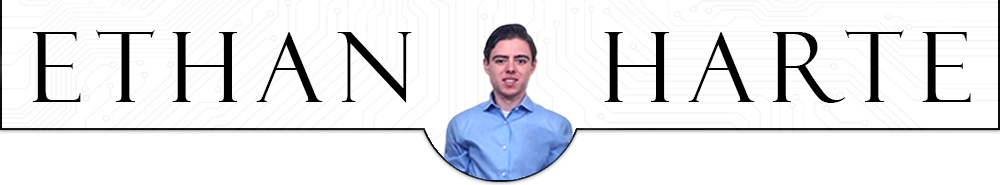
<style>
.page{position:relative;width:1000px;height:185px;background:#ffffff}
.page>*{position:absolute;margin:0}
.t1{font:97.2px "FelixTitlingMT";letter-spacing:0.15em;color:#000000}
</style>
<div class="page">
<p class="t1" style="left:32px;top:30px;width:939px;height:73px">Ethan    Harte</p>
</div>
